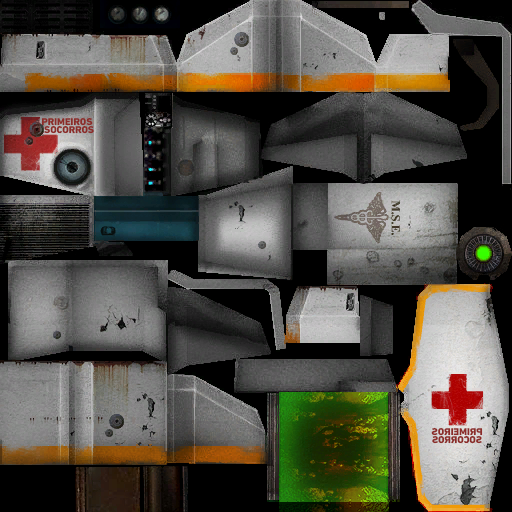
<style>
.page{position:relative;width:512px;height:512px}
.page>*{position:absolute;margin:0}
.t1{font:10.1px "DINNextLTPro-Heavy";color:#8c2c29}
</style>
<div class="page">
<p class="t1" style="left:41px;top:117px;width:52px;height:9px">PRIMEIROS</p>
<p class="t1" style="left:44px;top:125px;width:50px;height:9px">SOCORROS</p>
<p class="t1" style="left:431px;top:427px;width:52px;height:9px;rotate:180deg">PRIMEIROS</p>
<p class="t1" style="left:432px;top:435px;width:50px;height:9px;rotate:180deg">SOCORROS</p>
</div>
